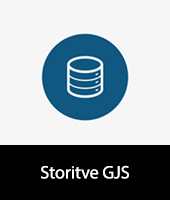
<style>
.page{position:relative;width:170px;height:200px;background:#f6f6f6}
.page>*{position:absolute;margin:0}
.t1{font:18px "MyriadPro-Regular";color:#ffffff}
</style>
<div class="page">
<p class="t1" style="left:41px;top:165px;width:88px;height:14px">Storitve GJS</p>
</div>
